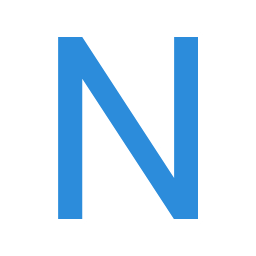
<style>
.page{position:relative;width:256px;height:256px;background:#ffffff}
.page>*{position:absolute;margin:0}
.t1{font:256px "Roboto-Regular";color:#2c8cdb}
</style>
<div class="page">
<p class="t1" style="left:58px;top:37px;width:140px;height:182px">N</p>
</div>
